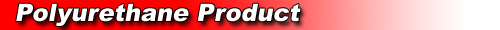
<style>
.page{position:relative;width:500px;height:30px;background:#ffffff}
.page>*{position:absolute;margin:0}
.t1{font:24px "Arial-Black";color:#ffffff;font-style:italic}
</style>
<div class="page">
<p class="t1" style="left:16px;top:3px;width:285px;height:23px">Polyurethane Product</p>
</div>
